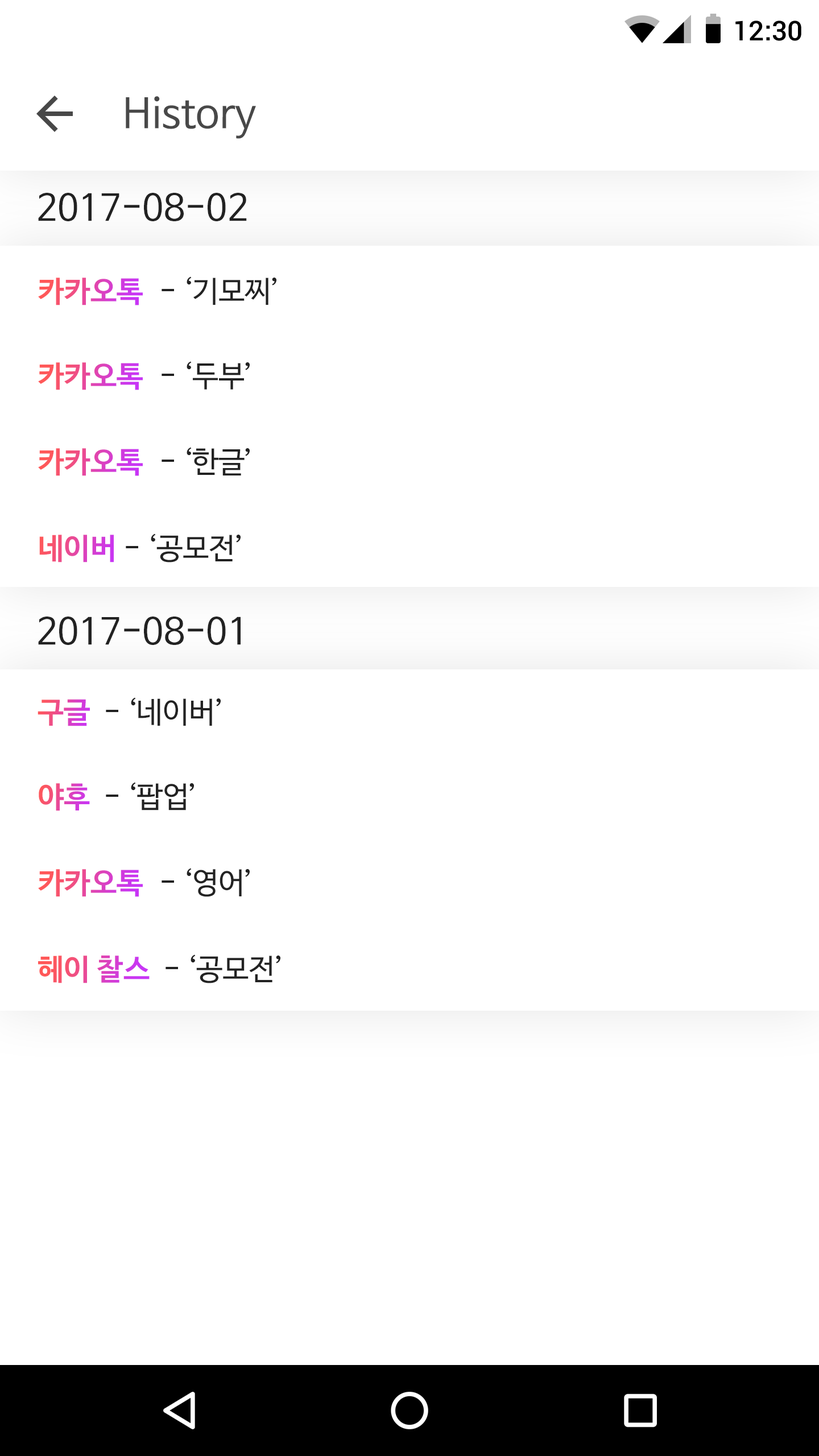
<style>
.page{position:relative;width:819px;height:1456px;background:#ffffff}
.page>*{position:absolute;margin:0}
.t1{font:27.3px "Roboto-Medium";color:#000000}
.t2{font:40.9px "NanumBarunGothic";color:#484848}
.t3{font:36.4px "NanumBarunGothic";color:#222222}
.t4{font:29.6px "NanumBarunGothicBold"}
.t5{font:29.6px "NanumBarunGothic";color:#222222}
</style>
<div class="page">
<p class="t1" style="left:735px;top:20px;width:66px;height:21px">12:30</p>
<p class="t2" style="left:126px;top:96px;width:130px;height:43px">History</p>
<p class="t3" style="left:38px;top:193px;width:209px;height:28px">2017-08-02</p>
<p class="t4" style="left:38px;top:278px;width:105px;height:27px">카카오톡</p>
<p class="t5" style="left:162px;top:276px;width:114px;height:29px">- ‘기모찌’</p>
<p class="t4" style="left:38px;top:362px;width:105px;height:28px">카카오톡</p>
<p class="t5" style="left:162px;top:361px;width:88px;height:29px">- ‘두부’</p>
<p class="t4" style="left:38px;top:448px;width:105px;height:28px">카카오톡</p>
<p class="t5" style="left:162px;top:447px;width:88px;height:28px">- ‘한글’</p>
<p class="t5" style="left:126px;top:533px;width:115px;height:29px">- ‘공모전’</p>
<p class="t4" style="left:39px;top:535px;width:75px;height:27px">네이버</p>
<p class="t3" style="left:38px;top:617px;width:203px;height:28px">2017-08-01</p>
<p class="t4" style="left:38px;top:699px;width:52px;height:27px">구글</p>
<p class="t5" style="left:106px;top:697px;width:115px;height:29px">- ‘네이버’</p>
<p class="t4" style="left:39px;top:783px;width:51px;height:28px">야후</p>
<p class="t5" style="left:106px;top:782px;width:88px;height:28px">- ‘팝업’</p>
<p class="t4" style="left:38px;top:869px;width:105px;height:28px">카카오톡</p>
<p class="t5" style="left:162px;top:868px;width:88px;height:29px">- ‘영어’</p>
<p class="t4" style="left:38px;top:955px;width:112px;height:28px">헤이 찰스</p>
<p class="t5" style="left:166px;top:954px;width:114px;height:29px">- ‘공모전’</p>
</div>
